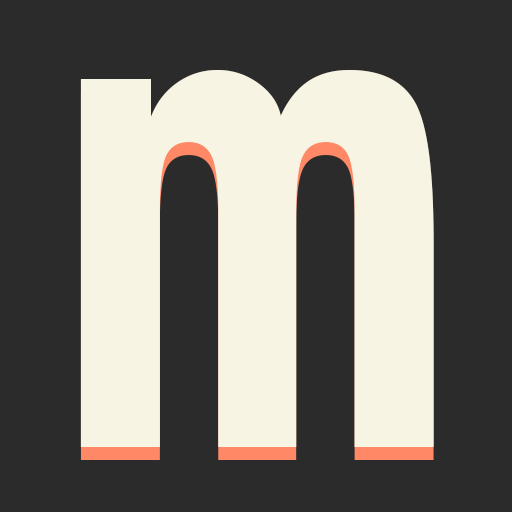
<style>
.page{position:relative;width:512px;height:512px;background:#2a2b2a}
.page>*{position:absolute;margin:0}
.t1{font:672.8px "Menlo-Bold";color:#f8f4e3}
</style>
<div class="page">
<p class="t1" style="left:80px;top:70px;width:354px;height:377px">m</p>
</div>
